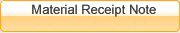
<style>
.page{position:relative;width:180px;height:33px}
.page>*{position:absolute;margin:0}
.t1{font:13px "ArialMT";color:#403f3f}
</style>
<div class="page">
<p class="t1" style="left:32px;top:4px;width:124px;height:13px">Material Receipt Note</p>
</div>
